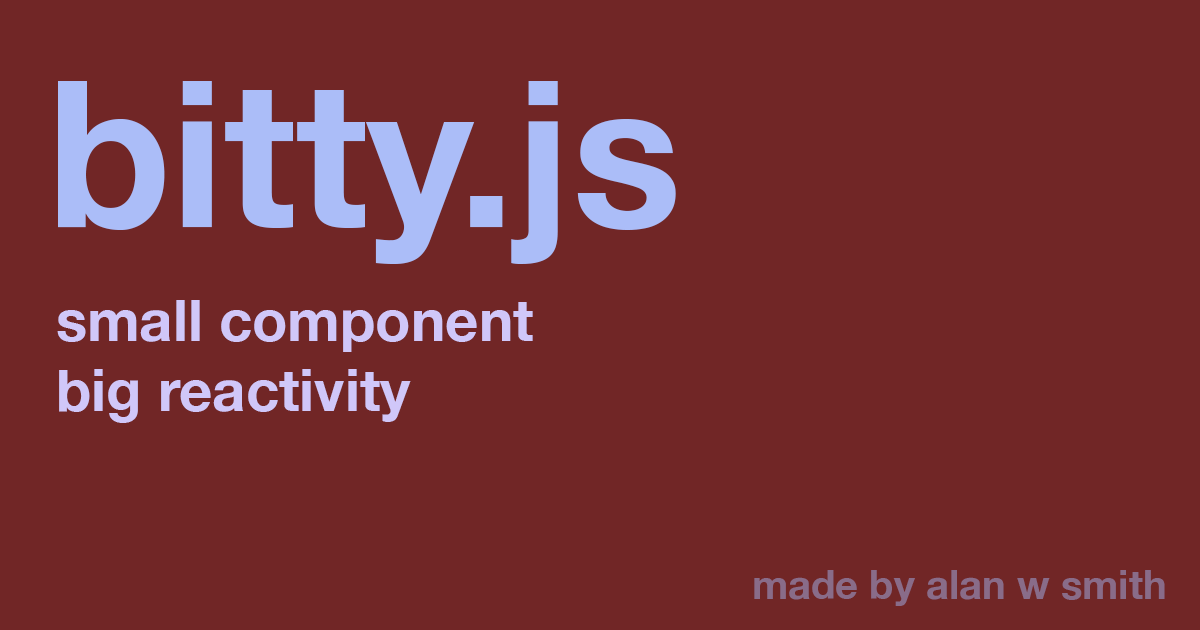
<style>
.page{position:relative;width:1200px;height:630px;background:#712626}
.page>*{position:absolute;margin:0}
.t1{font:204px "HelveticaNeue-Bold";color:#abbdf8}
.t2{font:58px "HelveticaNeue-Bold";color:#d0c7f9}
.t3{font:40px "HelveticaNeue-Bold";color:#896c89}
</style>
<div class="page">
<p class="t1" style="left:58px;top:81px;width:618px;height:183px">bitty.js</p>
<p class="t2" style="left:57px;top:300px;width:476px;height:123px">small component <br>big reactivity</p>
<p class="t3" style="left:754px;top:570px;width:411px;height:36px">made by alan w smith</p>
</div>
